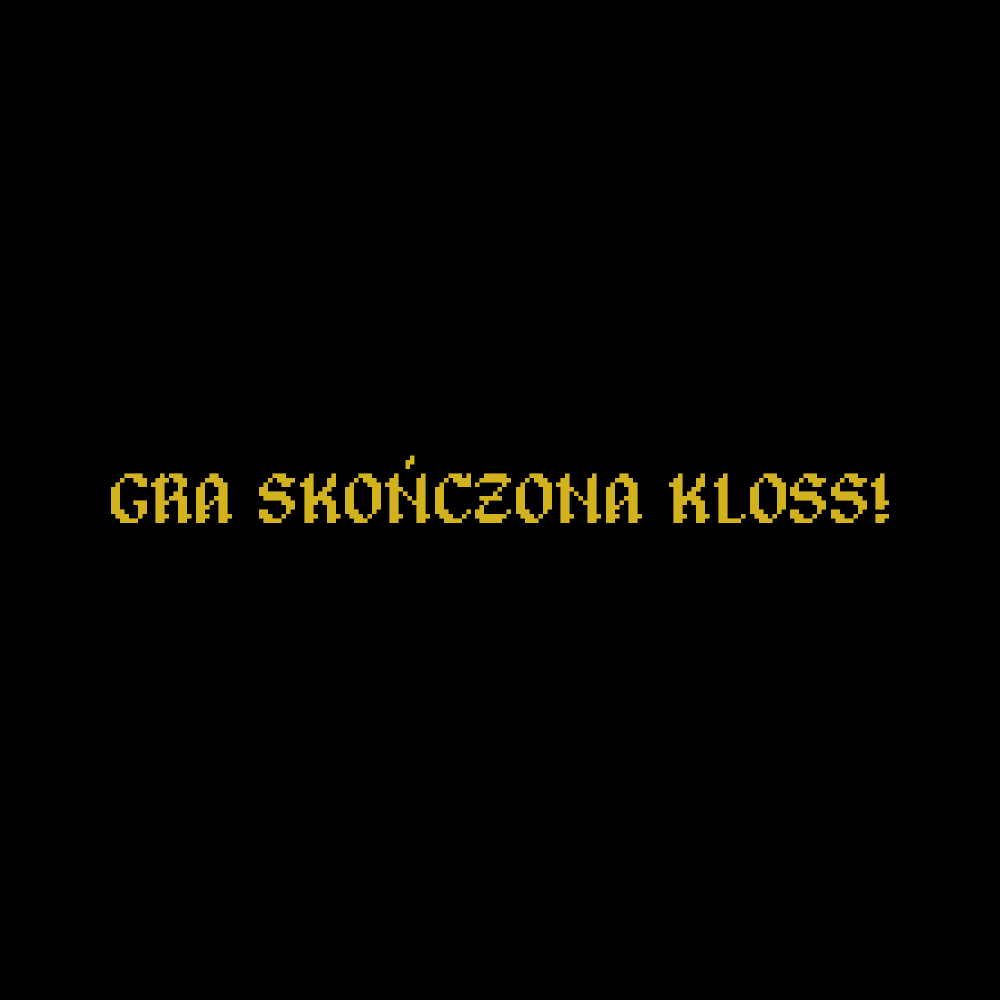
<style>
.page{position:relative;width:1000px;height:1000px;background:#000000}
.page>*{position:absolute;margin:0}
.t1{font:72px "Alagard";color:#d2b31f}
</style>
<div class="page">
<p class="t1" style="left:111px;top:473px;width:778px;height:50px">GRA SKONCZONA KLOSS!</p>
</div>
